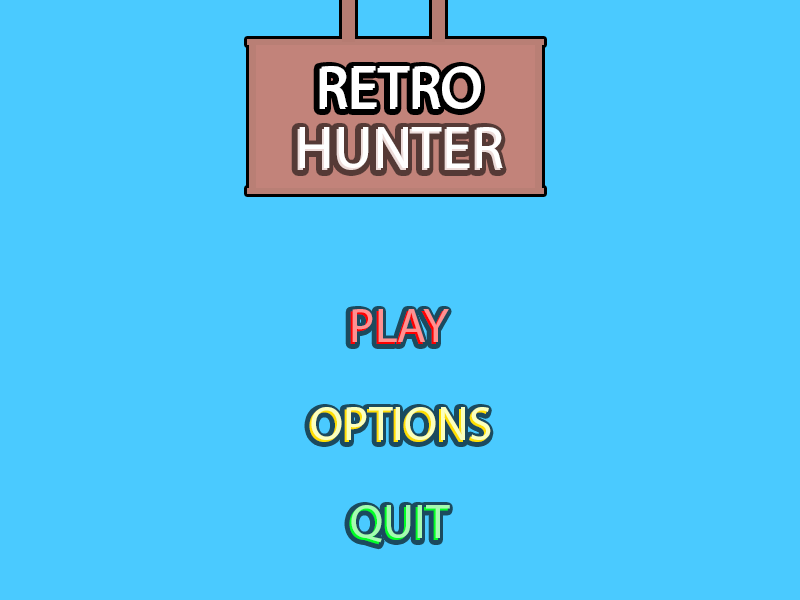
<style>
.page{position:relative;width:800px;height:600px;background:#4acaff}
.page>*{position:absolute;margin:0}
.t1{font:60px "MyriadPro-Regular";color:#ffffff}
.t2{font:60px "MyriadPro-Regular"}
.t3{font:48px "MyriadPro-Regular"}
.t4{font:48px "MyriadPro-Regular";color:#ff9191}
.t5{font:48px "MyriadPro-Regular";color:#faffbf}
.t6{font:48px "MyriadPro-Regular";color:#a5fbb1}
</style>
<div class="page">
<p class="t1" style="left:319px;top:68px;width:160px;height:41px">RETRO</p>
<p class="t1" style="left:321px;top:66px;width:160px;height:41px">RETRO</p>
<p class="t2" style="left:297px;top:129px;width:204px;height:41px">HUNTER</p>
<p class="t1" style="left:299px;top:127px;width:204px;height:41px">HUNTER</p>
<p class="t3" style="left:350px;top:311px;width:97px;height:33px">PLAY</p>
<p class="t4" style="left:352px;top:309px;width:97px;height:33px">PLAY</p>
<p class="t3" style="left:309px;top:409px;width:180px;height:33px">OPTIONS</p>
<p class="t5" style="left:311px;top:407px;width:180px;height:33px">OPTIONS</p>
<p class="t3" style="left:349px;top:507px;width:99px;height:38px">QUIT</p>
<p class="t6" style="left:351px;top:505px;width:99px;height:38px">QUIT</p>
</div>
